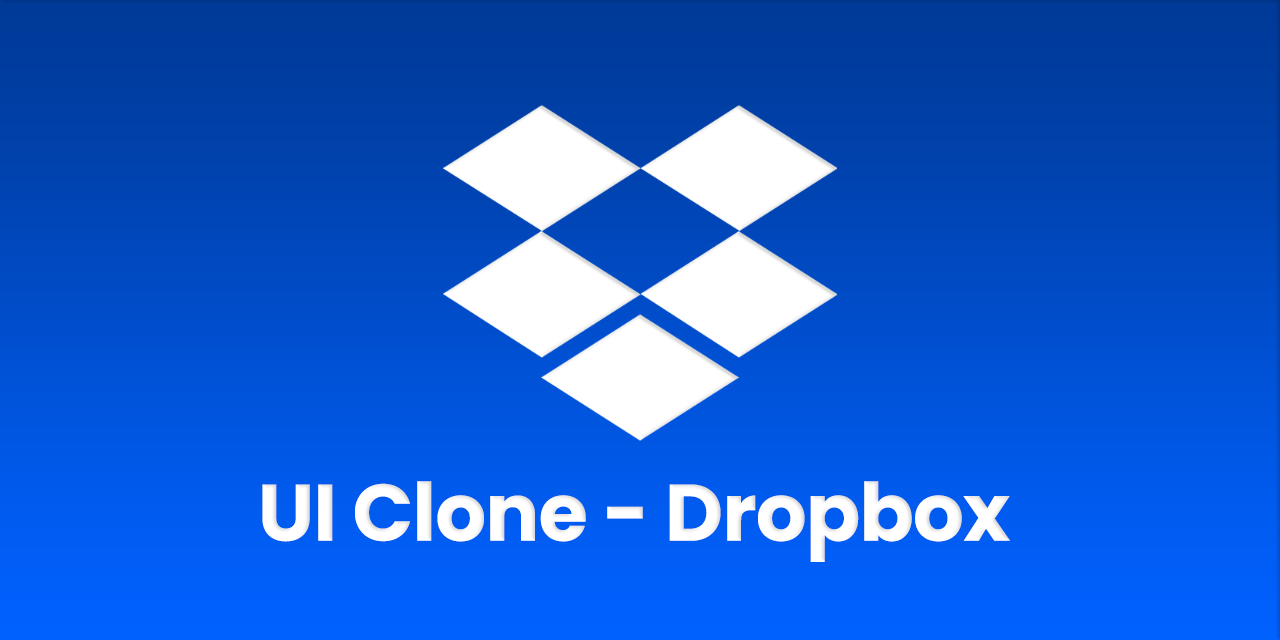
<style>
.page{position:relative;width:1280px;height:640px}
.page>*{position:absolute;margin:0}
.t1{font:80px "Poppins-Bold";letter-spacing:-0.01em;color:#ffffff}
</style>
<div class="page">
<p class="t1" style="left:262px;top:481px;width:748px;height:81px">UI Clone - Dropbox</p>
</div>
